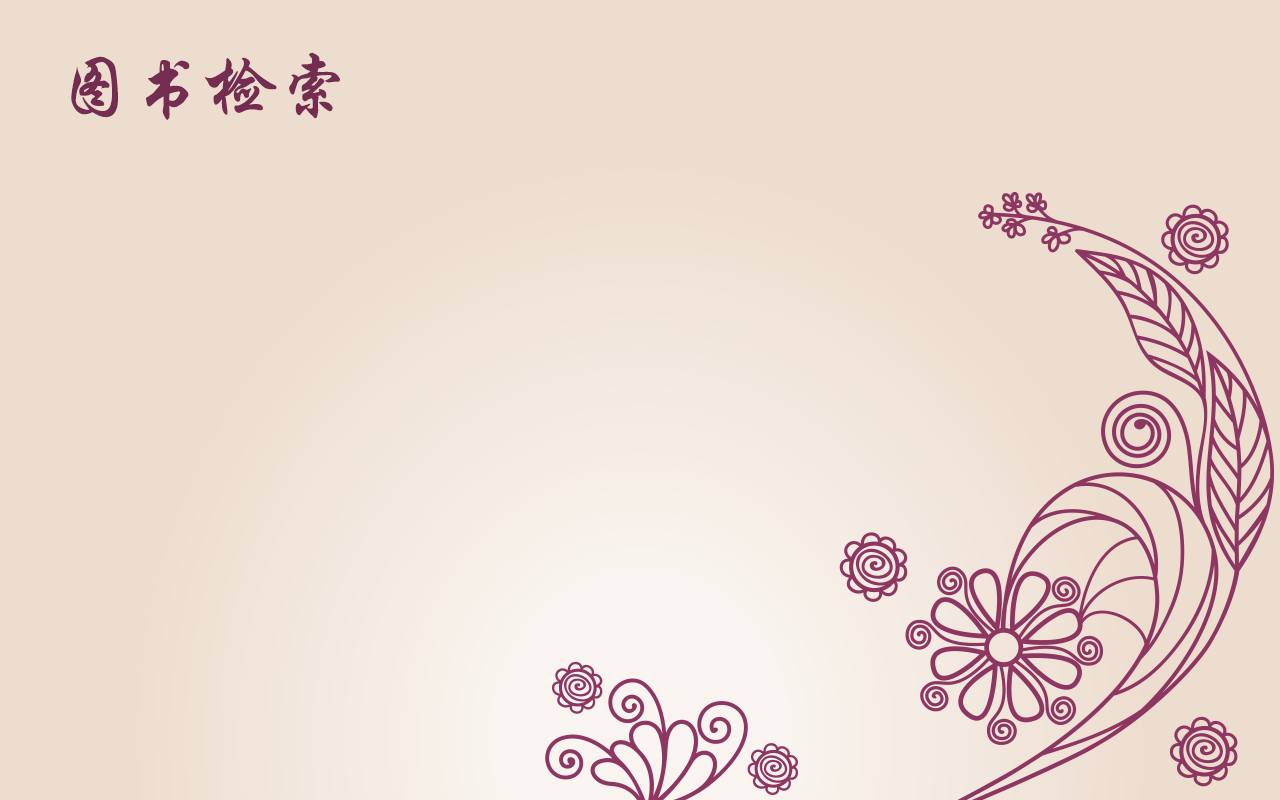
<style>
.page{position:relative;width:1280px;height:800px;background:#edddcf}
.page>*{position:absolute;margin:0}
.t1{font:73px "STXingkai";color:#742c50}
</style>
<div class="page">
<p class="t1" style="left:71px;top:52px;width:269px;height:68px">图书检索</p>
</div>
